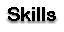
<style>
.page{position:relative;width:64px;height:32px;background:#ffffff}
.page>*{position:absolute;margin:0}
.t1{font:20px "ArialRoundedMTBold";color:#000000}
</style>
<div class="page">
<p class="t1" style="left:8px;top:7px;width:48px;height:14px">Skills</p>
</div>
